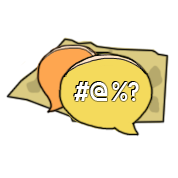
<style>
.page{position:relative;width:178px;height:178px;background:#ffffff}
.page>*{position:absolute;margin:0}
.t1{font:26.9px "BaronNeue";color:#ffffff;scale:0.89 1}
</style>
<div class="page">
<p class="t1" style="left:74px;top:82px;width:65px;height:19px">#@%?</p>
</div>
